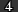
<style>
.page{position:relative;width:18px;height:12px;background:#333333}
.page>*{position:absolute;margin:0}
.t1{font:17px "Perpetua-Bold";color:#ffffff}
</style>
<div class="page">
<p class="t1" style="left:5px;top:1px;width:8px;height:10px">4</p>
</div>
